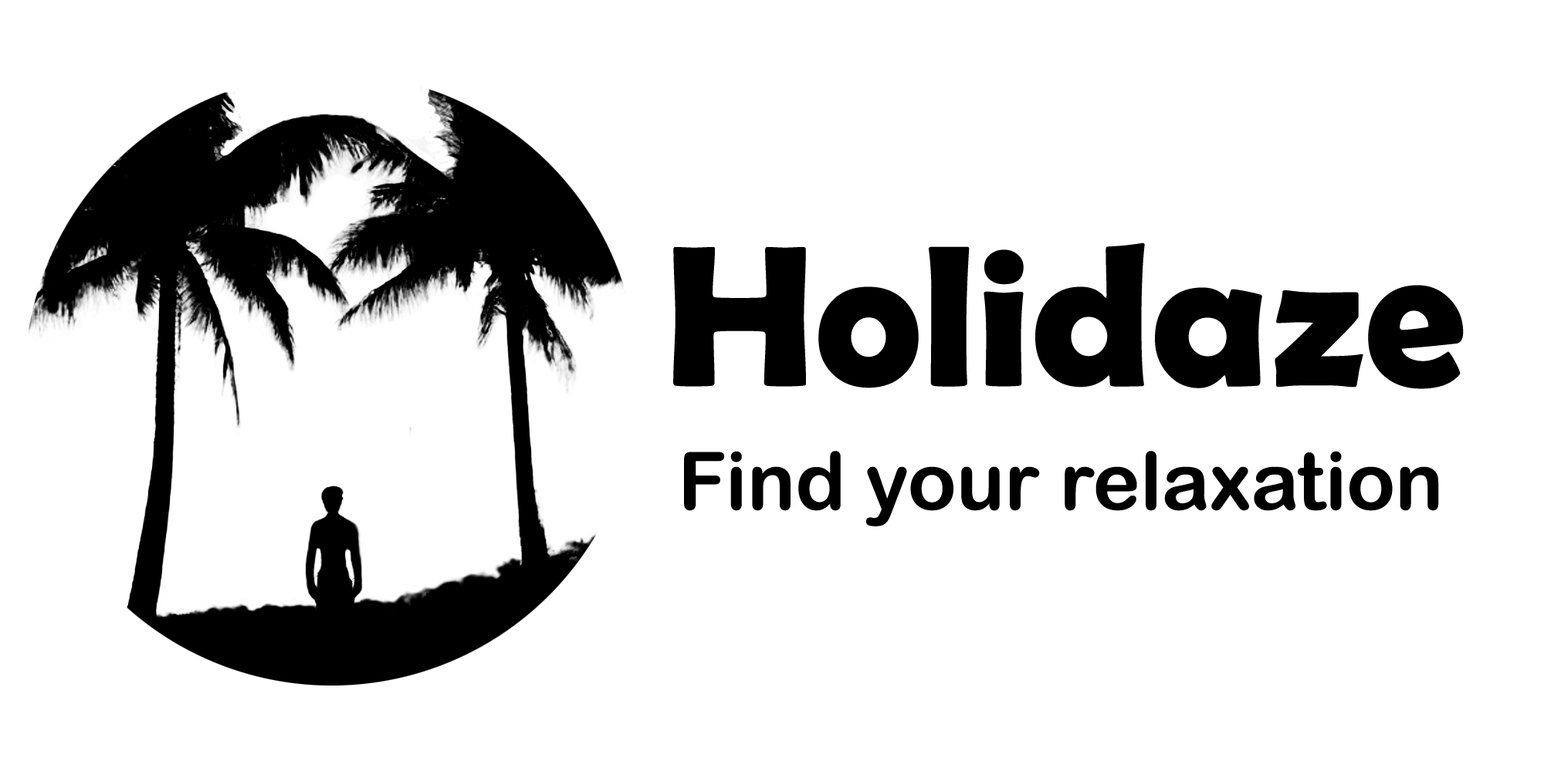
<style>
.page{position:relative;width:1544px;height:772px;background:#ffffff}
.page>*{position:absolute;margin:0}
.t1{font:202.2px "BerlinSansFBDemi-Bold";color:#000000}
.t2{font:80px "ArialRoundedMTBold";color:#000000}
</style>
<div class="page">
<p class="t1" style="left:673px;top:242px;width:791px;height:147px">Holidaze</p>
<p class="t2" style="left:684px;top:451px;width:755px;height:76px">Find your relaxation</p>
</div>
